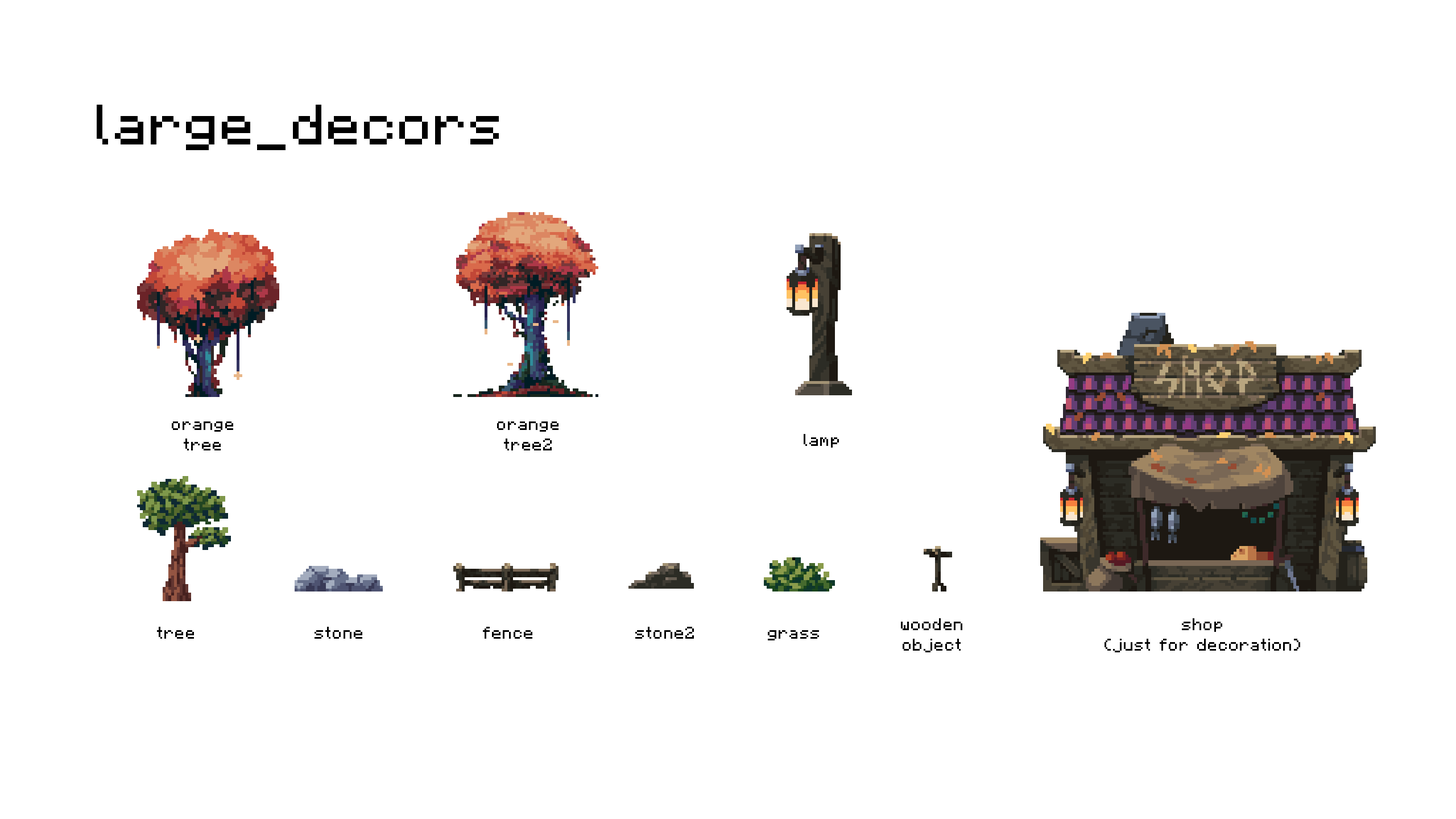
<style>
.page{position:relative;width:1456px;height:819px;background:#ffffff}
.page>*{position:absolute;margin:0}
.t1{font:56.9px "Minecraft-Regular";letter-spacing:0.025em;color:#000000}
.t2{font:17.1px "Minecraft-Regular";letter-spacing:0.025em;color:#000000}
</style>
<div class="page">
<p class="t1" style="left:97px;top:105px;width:402px;height:45px">large_decors</p>
<p class="t2" style="left:172px;top:421px;width:61px;height:29px;text-align:center">orange<br>tree</p>
<p class="t2" style="left:497px;top:421px;width:62px;height:29px;text-align:center">orange<br>tree2</p>
<p class="t2" style="left:804px;top:434px;width:35px;height:14px">lamp</p>
<p class="t2" style="left:157px;top:627px;width:37px;height:12px">tree</p>
<p class="t2" style="left:315px;top:627px;width:47px;height:12px">stone</p>
<p class="t2" style="left:483px;top:627px;width:49px;height:12px">fence</p>
<p class="t2" style="left:635px;top:627px;width:59px;height:12px">stone2</p>
<p class="t2" style="left:901px;top:618px;width:61px;height:34px;text-align:center">wooden<br>object</p>
<p class="t2" style="left:1104px;top:618px;width:196px;height:34px;text-align:center">shop<br>(just for decoration)</p>
<p class="t2" style="left:768px;top:630px;width:51px;height:10px">grass</p>
</div>
